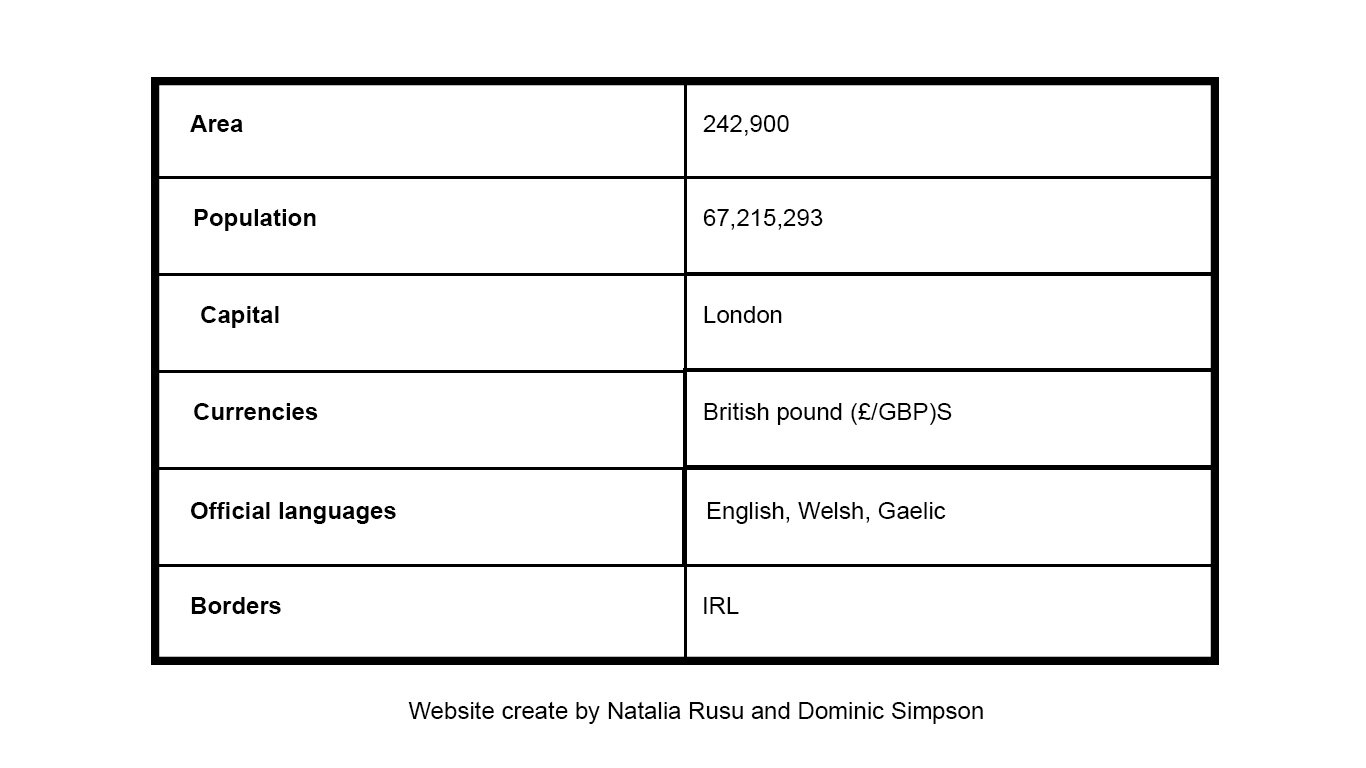
<style>
.page{position:relative;width:1366px;height:768px;background:#ffffff}
.page>*{position:absolute;margin:0}
.t1{font:24px "Arial-BoldMT";color:#000000}
.t2{font:24px "ArialMT";color:#000000}
</style>
<div class="page">
<p class="t1" style="left:190px;top:115px;width:53px;height:17px">Area</p>
<p class="t2" style="left:703px;top:115px;width:86px;height:21px">242,900</p>
<p class="t1" style="left:194px;top:209px;width:122px;height:22px">Population</p>
<p class="t2" style="left:703px;top:209px;width:120px;height:21px">67,215,293</p>
<p class="t1" style="left:201px;top:306px;width:78px;height:22px">Capital</p>
<p class="t2" style="left:704px;top:306px;width:78px;height:17px">London</p>
<p class="t1" style="left:194px;top:403px;width:124px;height:17px">Currencies</p>
<p class="t2" style="left:704px;top:402px;width:248px;height:23px">British pound (£/GBP)S</p>
<p class="t1" style="left:191px;top:502px;width:205px;height:22px">Official languages</p>
<p class="t2" style="left:707px;top:502px;width:239px;height:22px">English, Welsh, Gaelic</p>
<p class="t1" style="left:191px;top:597px;width:90px;height:17px">Borders</p>
<p class="t2" style="left:704px;top:597px;width:35px;height:17px">IRL</p>
<p class="t2" style="left:408px;top:701px;width:575px;height:23px">Website create by Natalia Rusu and Dominic Simpson</p>
</div>
